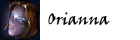
<style>
.page{position:relative;width:140px;height:40px;background:#ffffff}
.page>*{position:absolute;margin:0}
.t1{font:12px "VinerHandITC";color:#000000}
</style>
<div class="page">
<p class="t1" style="left:48px;top:12px;width:62px;height:14px">Orianna</p>
</div>
